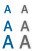
<style>
.page{position:relative;width:34px;height:51px;background:#ffffff}
.page>*{position:absolute;margin:0}
.t1{font:11px "Tahoma";color:#006394}
.t2{font:11px "Tahoma";color:#666666}
.t3{font:14px "Tahoma";color:#006394}
.t4{font:14px "Tahoma";color:#666666}
.t5{font:18px "Tahoma";color:#006394}
.t6{font:18px "Tahoma";color:#666666}
</style>
<div class="page">
<p class="t1" style="left:4px;top:5px;width:7px;height:9px">A</p>
<p class="t2" style="left:21px;top:5px;width:7px;height:9px">A</p>
<p class="t3" style="left:3px;top:20px;width:10px;height:12px">A</p>
<p class="t4" style="left:20px;top:20px;width:10px;height:12px">A</p>
<p class="t5" style="left:2px;top:35px;width:12px;height:14px">A</p>
<p class="t6" style="left:19px;top:35px;width:12px;height:14px">A</p>
</div>
